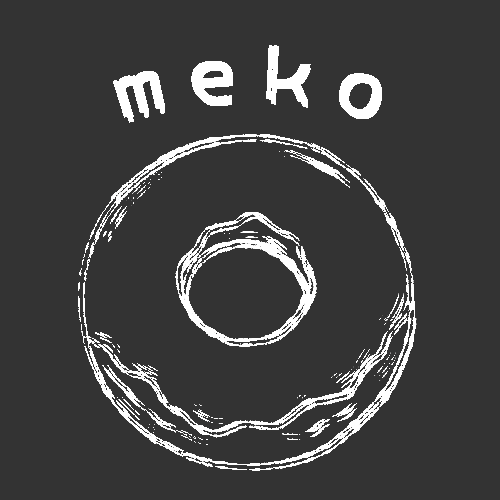
<style>
.page{position:relative;width:500px;height:500px;background:#333333}
.page>*{position:absolute;margin:0}
.t1{font:72.3px "CascadiaMonoRoman-ExtraLight";letter-spacing:0.3em;color:#ffffff}
</style>
<div class="page">
<p class="t1" style="left:118px;top:49px;width:264px;height:73px">meko</p>
</div>
